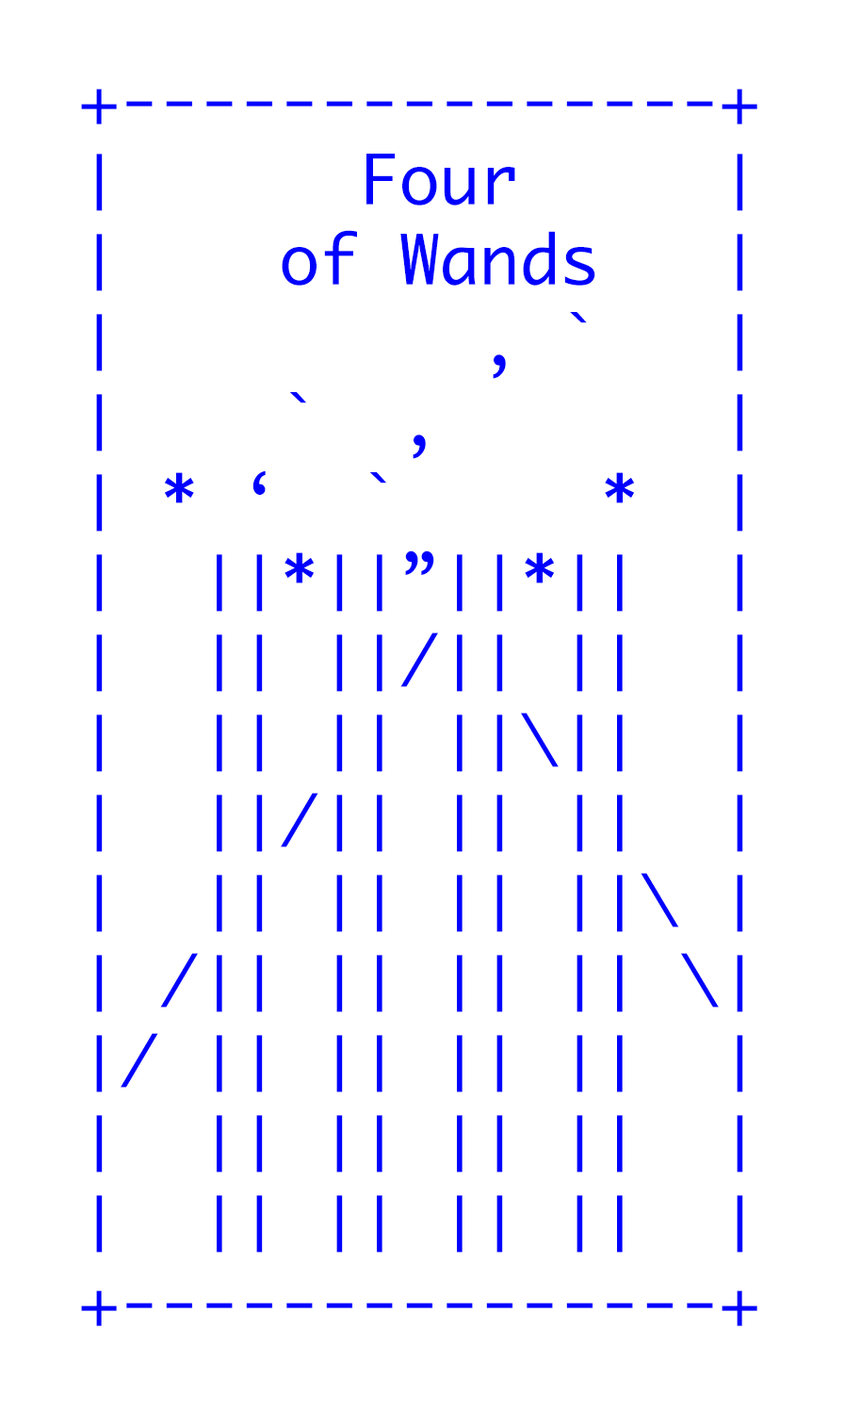
<style>
.page{position:relative;width:845px;height:1411px;background:#ffffff}
.page>*{position:absolute;margin:0}
.t1{font:66.7px "Monaco";color:#0000ff}
</style>
<div class="page">
<p class="t1" style="left:81px;top:89px;width:677px;height:1237px">+---------------+<br>│      Four     │<br>│    of Wands   │<br>│         , `   │<br>│    `  ,       │<br>│ * ‘  `     *  │<br>│  ││*││”││*││  │<br>│  ││ ││/││ ││  │<br>│  ││ ││ ││\││  │<br>│  ││/││ ││ ││  │<br>│  ││ ││ ││ ││\ │<br>│ /││ ││ ││ ││ \│<br>│/ ││ ││ ││ ││  │<br>│  ││ ││ ││ ││  │<br>│  ││ ││ ││ ││  │<br>+---------------+</p>
</div>
